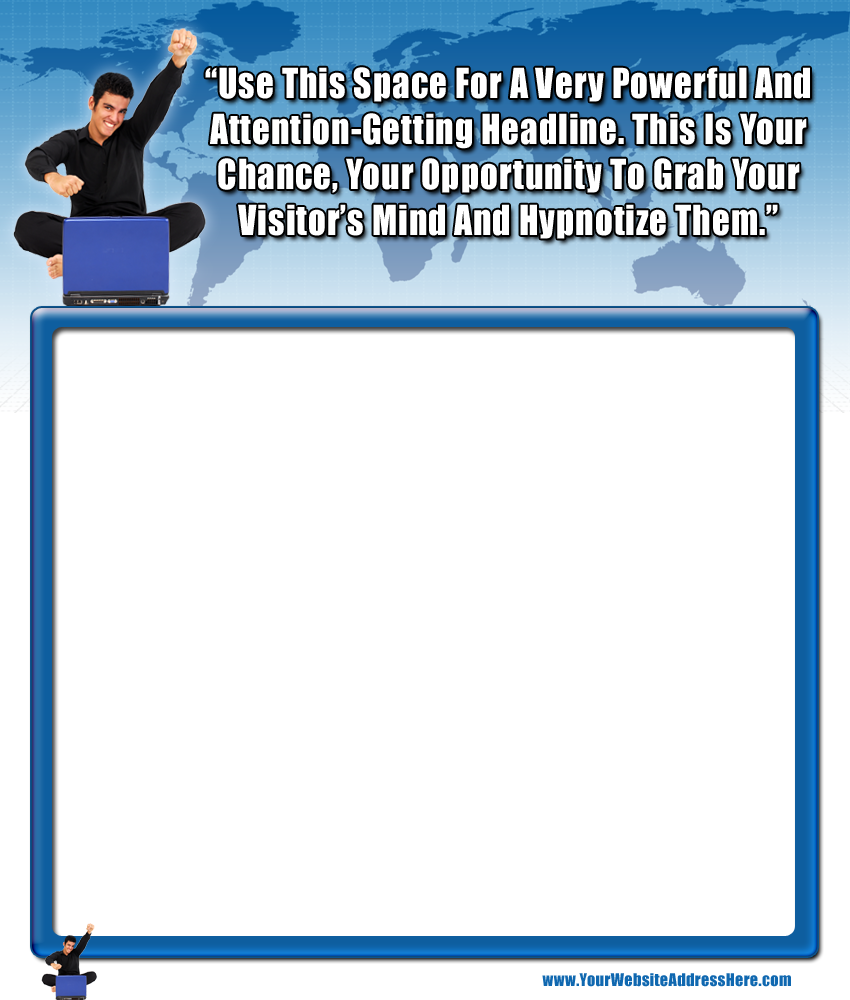
<style>
.page{position:relative;width:850px;height:1000px;background:#ffffff}
.page>*{position:absolute;margin:0}
.t1{font:38.1px "Impact";letter-spacing:0.025em;color:#ffffff;scale:0.93 1}
.t2{font:16.2px "Impact";letter-spacing:0.025em;color:#1068b0}
</style>
<div class="page">
<p class="t1" style="left:205px;top:67px;width:605px;height:172px;text-align:center">“Use This Space For A Very Powerful And<br>Attention-Getting Headline. This Is Your<br>Chance, Your Opportunity To Grab Your<br>Visitor’s Mind And Hypnotize Them.”</p>
<p class="t2" style="left:542px;top:973px;width:249px;height:14px">www.YourWebsiteAddressHere.com</p>
</div>
